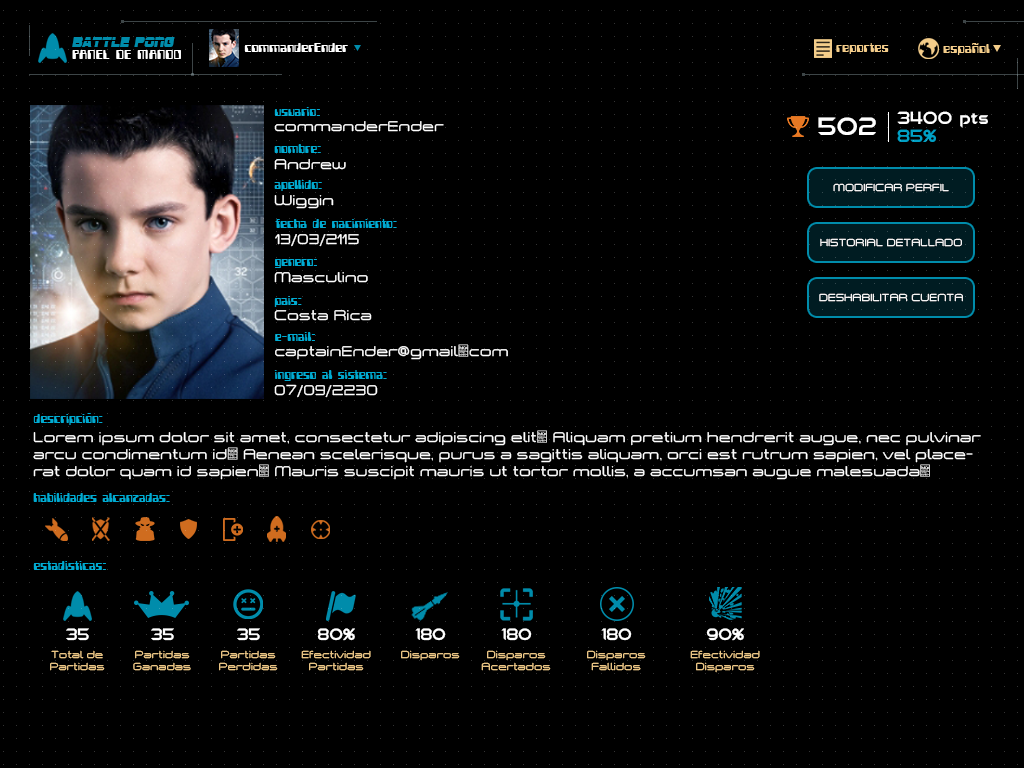
<style>
.page{position:relative;width:1024px;height:768px;background:#000000}
.page>*{position:absolute;margin:0}
.t1{font:14.8px "SFSportsNight";color:#008cab}
.t2{font:14.8px "Computerfont";color:#ffffff}
.t3{font:15px "Computerfont";color:#ffffff}
.t4{font:15.6px "Computerfont";color:#f4cd8a}
.t5{font:14.2px "Computerfont";color:#00abd2}
.t6{font:18px "Chromia";color:#ffffff}
.t7{font:14.2px "aspace";color:#ffffff}
.t8{font:25.6px "Chromia";color:#ffffff;scale:1.04 1}
.t9{font:18px "Chromia";color:#00a0c5}
.t10{font:10px "aspace";color:#ffffff}
.t11{font:16.7px "Chromia";color:#ffffff}
.t12{font:10px "aspace";color:#f4cd8a}
</style>
<div class="page">
<p class="t1" style="left:72px;top:37px;width:103px;height:10px">BATTLE PONG</p>
<p class="t2" style="left:72px;top:50px;width:109px;height:9px">PANEL DE MANDO</p>
<p class="t3" style="left:244px;top:43px;width:104px;height:9px">commanderEnder</p>
<p class="t4" style="left:836px;top:43px;width:53px;height:11px">reportes</p>
<p class="t4" style="left:943px;top:43px;width:47px;height:12px">español</p>
<p class="t5" style="left:274px;top:107px;width:46px;height:9px">usuario:</p>
<p class="t6" style="left:897px;top:111px;width:91px;height:17px">3400 pts</p>
<p class="t7" style="left:274px;top:121px;width:170px;height:11px">commanderEnder</p>
<p class="t8" style="left:818px;top:117px;width:58px;height:18px">502</p>
<p class="t9" style="left:897px;top:129px;width:40px;height:13px">85%</p>
<p class="t5" style="left:274px;top:144px;width:47px;height:9px">nombre:</p>
<p class="t7" style="left:274px;top:159px;width:72px;height:11px">Andrew</p>
<p class="t5" style="left:274px;top:180px;width:48px;height:11px">apellido:</p>
<p class="t10" style="left:833px;top:183px;width:116px;height:9px">MODIFICAR PERFIL</p>
<p class="t7" style="left:274px;top:195px;width:60px;height:14px">Wiggin</p>
<p class="t5" style="left:275px;top:219px;width:122px;height:9px">fecha de nacimiento:</p>
<p class="t7" style="left:275px;top:234px;width:84px;height:13px">13/03/2115</p>
<p class="t10" style="left:820px;top:238px;width:142px;height:9px">HISTORIAL DETALLADO</p>
<p class="t5" style="left:275px;top:259px;width:42px;height:9px">genero:</p>
<p class="t7" style="left:274px;top:272px;width:94px;height:11px">Masculino</p>
<p class="t10" style="left:819px;top:293px;width:144px;height:9px">DESHABILITAR CUENTA</p>
<p class="t5" style="left:274px;top:296px;width:28px;height:11px">pais:</p>
<p class="t7" style="left:274px;top:310px;width:98px;height:11px">Costa Rica</p>
<p class="t5" style="left:275px;top:332px;width:40px;height:9px">e-mail:</p>
<p class="t7" style="left:275px;top:344px;width:233px;height:16px">captainEnder@gmail.com</p>
<p class="t5" style="left:274px;top:370px;width:113px;height:11px">ingreso al sistema:</p>
<p class="t7" style="left:274px;top:384px;width:104px;height:14px">07/09/2230</p>
<p class="t5" style="left:33px;top:413px;width:70px;height:12px">descripción:</p>
<p class="t7" style="left:33px;top:430px;width:948px;height:50px">Lorem ipsum dolor sit amet, consectetur adipiscing elit. Aliquam pretium hendrerit augue, nec pulvinar arcu condimentum id. Aenean scelerisque, purus a sagittis aliquam, orci est rutrum sapien, vel placerat dolor quam id sapien. Mauris suscipit mauris ut tortor mollis, a accumsan augue malesuada.</p>
<p class="t5" style="left:33px;top:493px;width:137px;height:9px">habilidades alcanzadas:</p>
<p class="t5" style="left:33px;top:561px;width:73px;height:9px">estadisticas:</p>
<p class="t11" style="left:66px;top:628px;width:23px;height:13px">35</p>
<p class="t11" style="left:151px;top:628px;width:23px;height:13px">35</p>
<p class="t11" style="left:237px;top:628px;width:23px;height:13px">35</p>
<p class="t11" style="left:317px;top:628px;width:38px;height:13px">80%</p>
<p class="t11" style="left:415px;top:628px;width:31px;height:13px">180</p>
<p class="t11" style="left:501px;top:628px;width:31px;height:13px">180</p>
<p class="t11" style="left:601px;top:628px;width:31px;height:13px">180</p>
<p class="t11" style="left:706px;top:628px;width:38px;height:13px">90%</p>
<p class="t12" style="left:50px;top:650px;width:55px;height:21px;text-align:center">Total de<br>Partidas</p>
<p class="t12" style="left:133px;top:650px;width:58px;height:21px;text-align:center">Partidas<br>Ganadas</p>
<p class="t12" style="left:219px;top:650px;width:59px;height:21px;text-align:center">Partidas<br>Perdidas</p>
<p class="t12" style="left:301px;top:650px;width:70px;height:21px;text-align:center">Efectividad<br>Partidas</p>
<p class="t12" style="left:401px;top:650px;width:59px;height:11px">Disparos</p>
<p class="t12" style="left:481px;top:650px;width:70px;height:21px;text-align:center">Disparos<br>Acertados</p>
<p class="t12" style="left:587px;top:650px;width:59px;height:21px;text-align:center">Disparos<br>Fallidos</p>
<p class="t12" style="left:690px;top:650px;width:70px;height:23px;text-align:center">Efectividad<br>Disparos</p>
</div>
